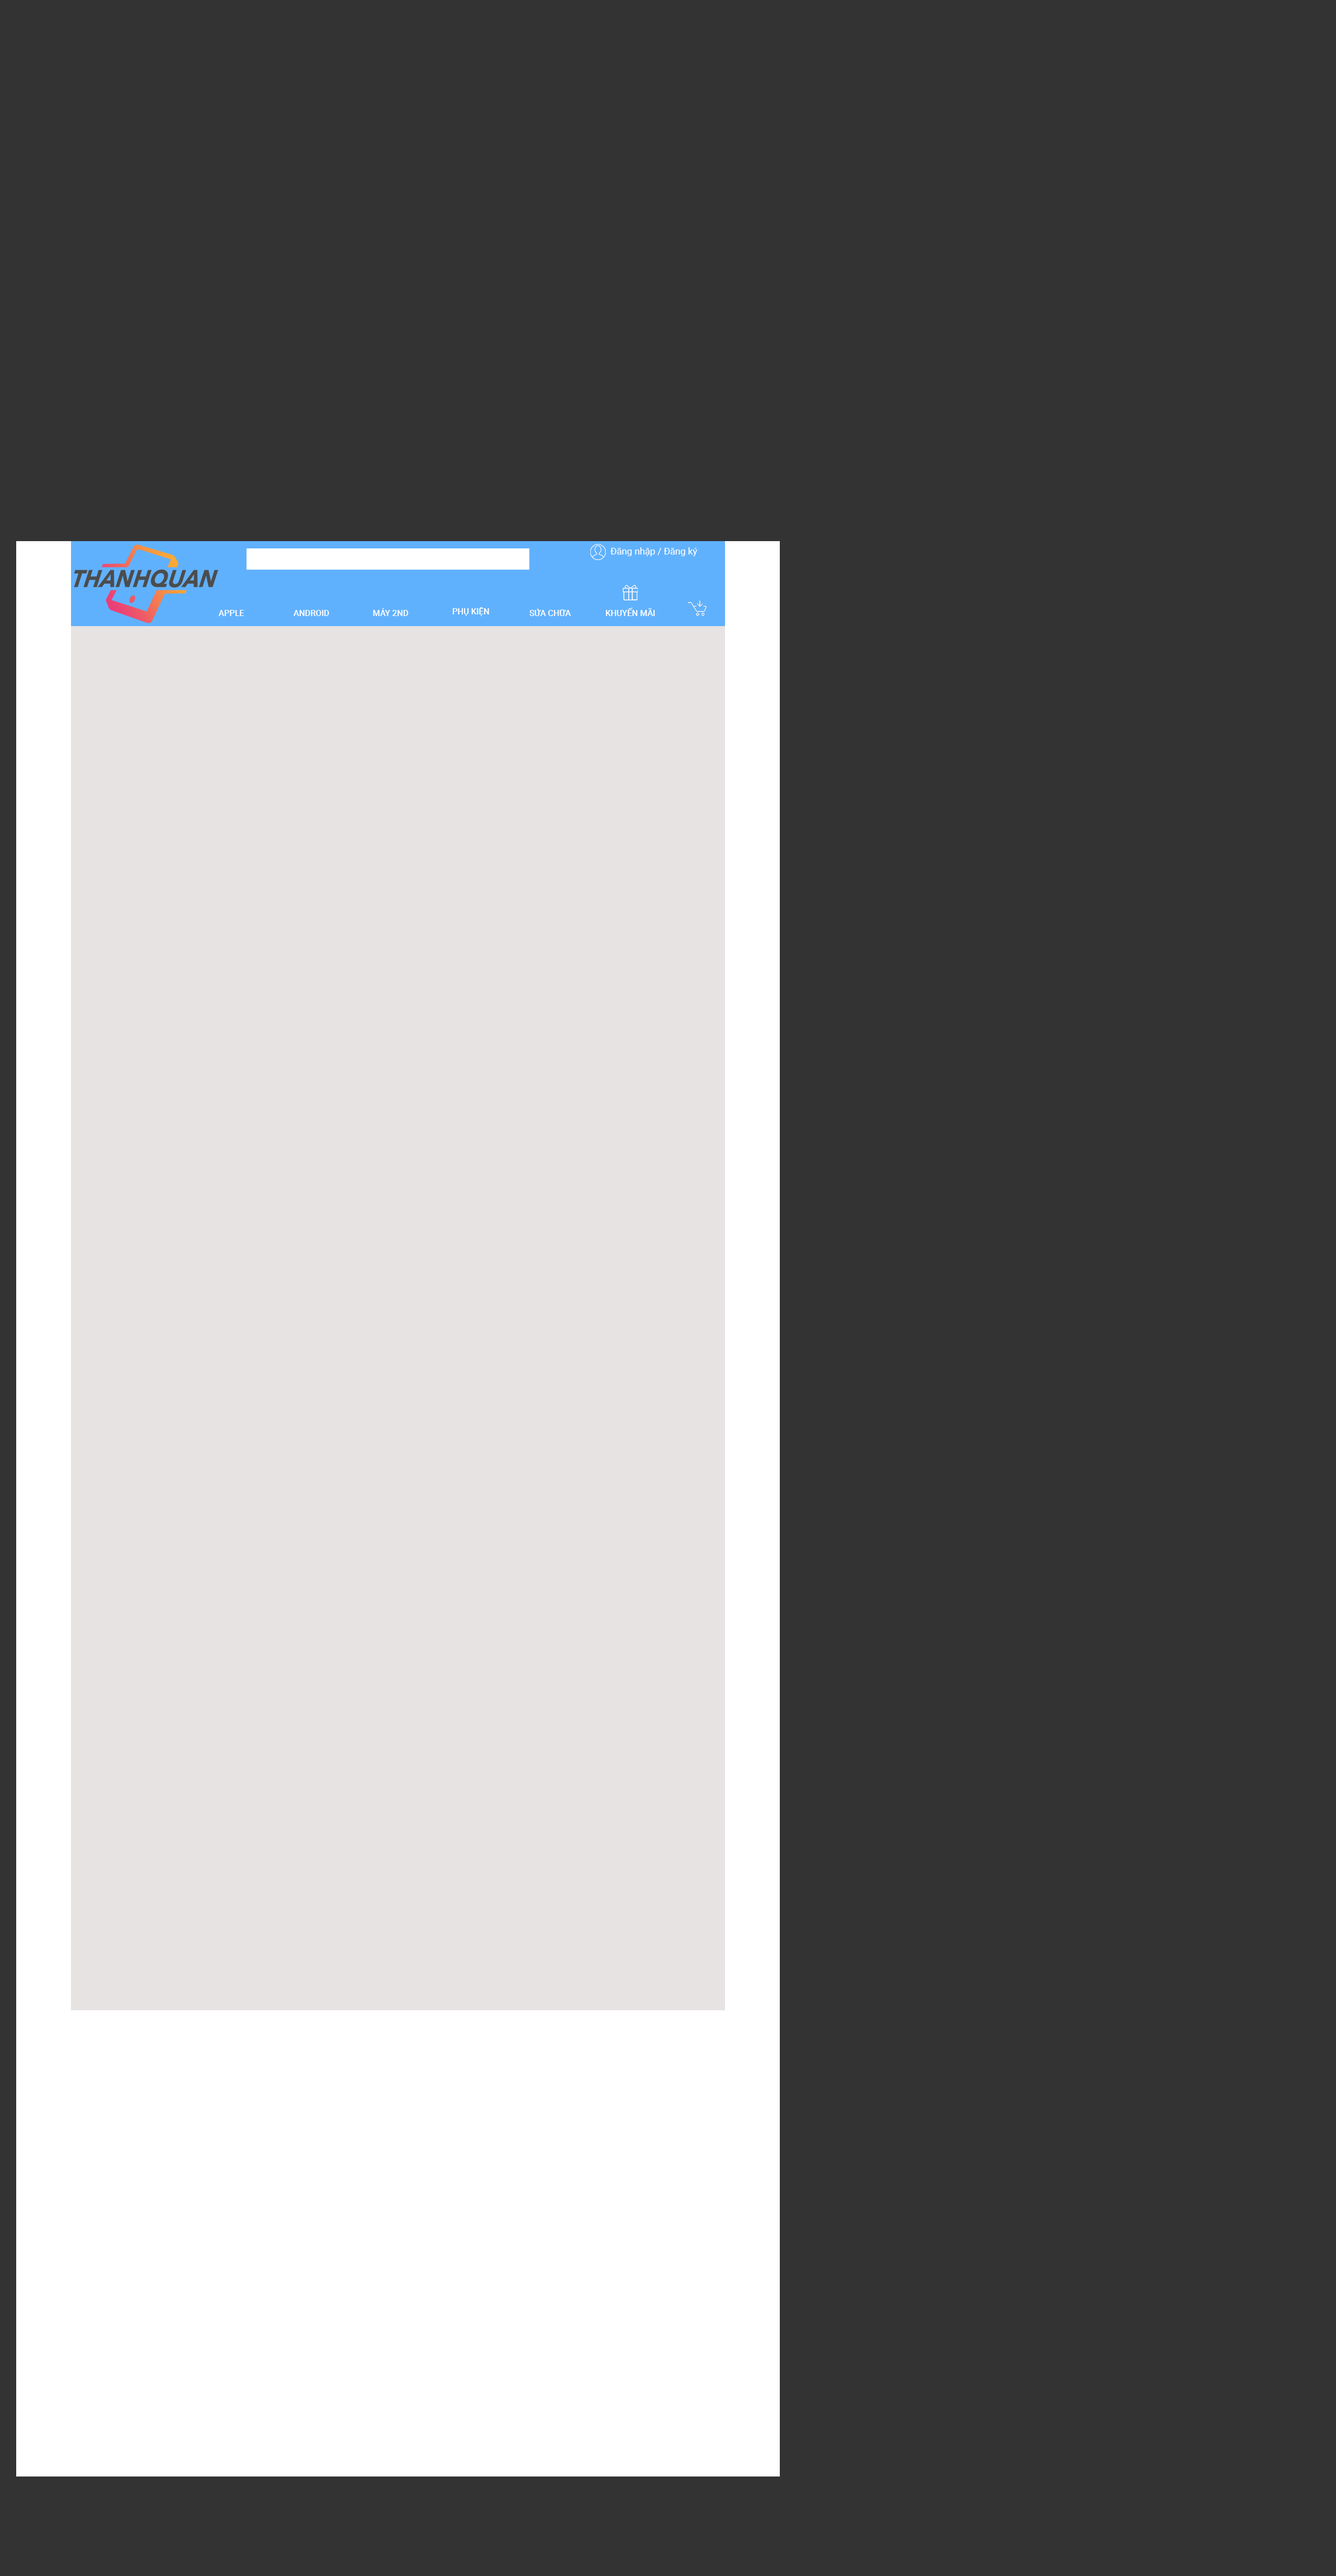
<style>
.page{position:relative;width:1336px;height:2576px;background:#333333}
.page>*{position:absolute;margin:0}
.t1{font:9.4px "Roboto-Regular";color:#ffffff}
.t2{font:8.4px "Roboto-Medium";color:#ffffff}
</style>
<div class="page">
<p class="t1" style="left:610px;top:547px;width:88px;height:9px">Đăng nhập / Đăng ký</p>
<p class="t2" style="left:219px;top:610px;width:25px;height:6px">APPLE</p>
<p class="t2" style="left:293px;top:610px;width:36px;height:6px">ANDROID</p>
<p class="t2" style="left:373px;top:608px;width:36px;height:8px">MÁY 2ND</p>
<p class="t2" style="left:453px;top:607px;width:36px;height:9px">PHỤ KIỆN</p>
<p class="t2" style="left:529px;top:609px;width:42px;height:7px">SỬA CHỮA</p>
<p class="t2" style="left:606px;top:608px;width:49px;height:8px">KHUYẾN MÃI</p>
</div>
